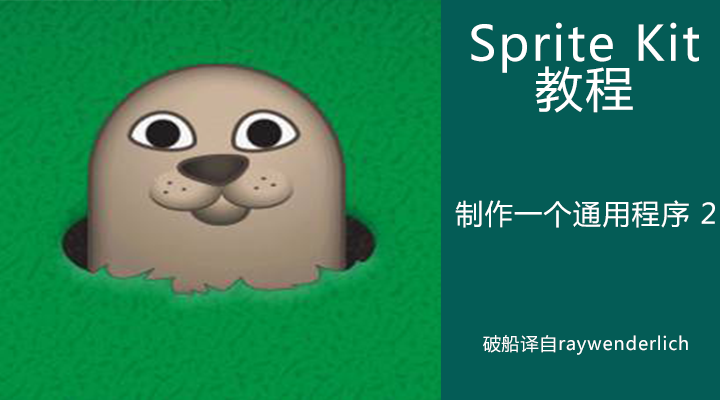
<style>
.page{position:relative;width:720px;height:400px;background:#045c56}
.page>*{position:absolute;margin:0}
.t1{font:48px/15px "MicrosoftYaHei";letter-spacing:0.05em;color:#ffffff}
.t2{font:28px "MicrosoftYaHei";letter-spacing:0.05em;color:#ffffff}
.t3{font:18px "MicrosoftYaHei";letter-spacing:0.05em;color:#ffffff}
</style>
<div class="page">
<p class="t1" style="left:471px;top:22px;width:228px;height:91px;text-align:center">Sprite Kit<br><br><br>教程</p>
<p class="t2" style="left:455px;top:200px;width:260px;height:28px">制作一个通用程序 2</p>
<p class="t3" style="left:483px;top:335px;width:205px;height:20px">破船译自raywenderlich</p>
</div>
